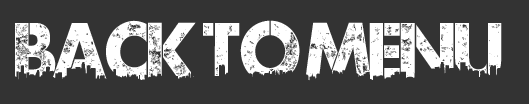
<style>
.page{position:relative;width:529px;height:104px;background:#333333}
.page>*{position:absolute;margin:0}
.t1{font:75px "UrbanJungleDEMO";color:#ffffff}
</style>
<div class="page">
<p class="t1" style="left:15px;top:20px;width:487px;height:61px">Back to menu</p>
</div>
